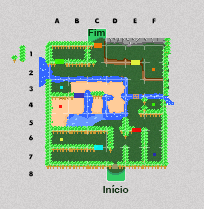
<style>
.page{position:relative;width:204px;height:209px}
.page>*{position:absolute;margin:0}
.t1{font:6.8px "Plumpfull";color:#000000}
.t2{font:10px "Arial-BoldMT";letter-spacing:-0.005em;color:#052907}
.t3{font:6.8px "Plumpfull"}
.t4{font:10px "Arial-BoldMT";letter-spacing:-0.005em;color:#052a07}
</style>
<div class="page">
<p class="t1" style="left:54px;top:18px;width:6px;height:6px">A</p>
<p class="t1" style="left:75px;top:18px;width:5px;height:6px">B</p>
<p class="t2" style="left:88px;top:29px;width:17px;height:7px">Fim</p>
<p class="t1" style="left:95px;top:18px;width:5px;height:6px">C</p>
<p class="t1" style="left:112px;top:18px;width:6px;height:6px">D</p>
<p class="t1" style="left:133px;top:18px;width:4px;height:6px">E</p>
<p class="t1" style="left:152px;top:18px;width:4px;height:6px">F</p>
<p class="t1" style="left:30px;top:51px;width:2px;height:6px">1</p>
<p class="t1" style="left:29px;top:70px;width:4px;height:6px">2</p>
<p class="t3" style="left:29px;top:86px;width:4px;height:6px">3</p>
<p class="t1" style="left:28px;top:102px;width:5px;height:6px">4</p>
<p class="t1" style="left:29px;top:120px;width:4px;height:6px">5</p>
<p class="t1" style="left:29px;top:135px;width:4px;height:6px">6</p>
<p class="t1" style="left:29px;top:154px;width:4px;height:6px">7</p>
<p class="t1" style="left:29px;top:171px;width:4px;height:6px">8</p>
<p class="t4" style="left:103px;top:185px;width:26px;height:8px">Início</p>
</div>
